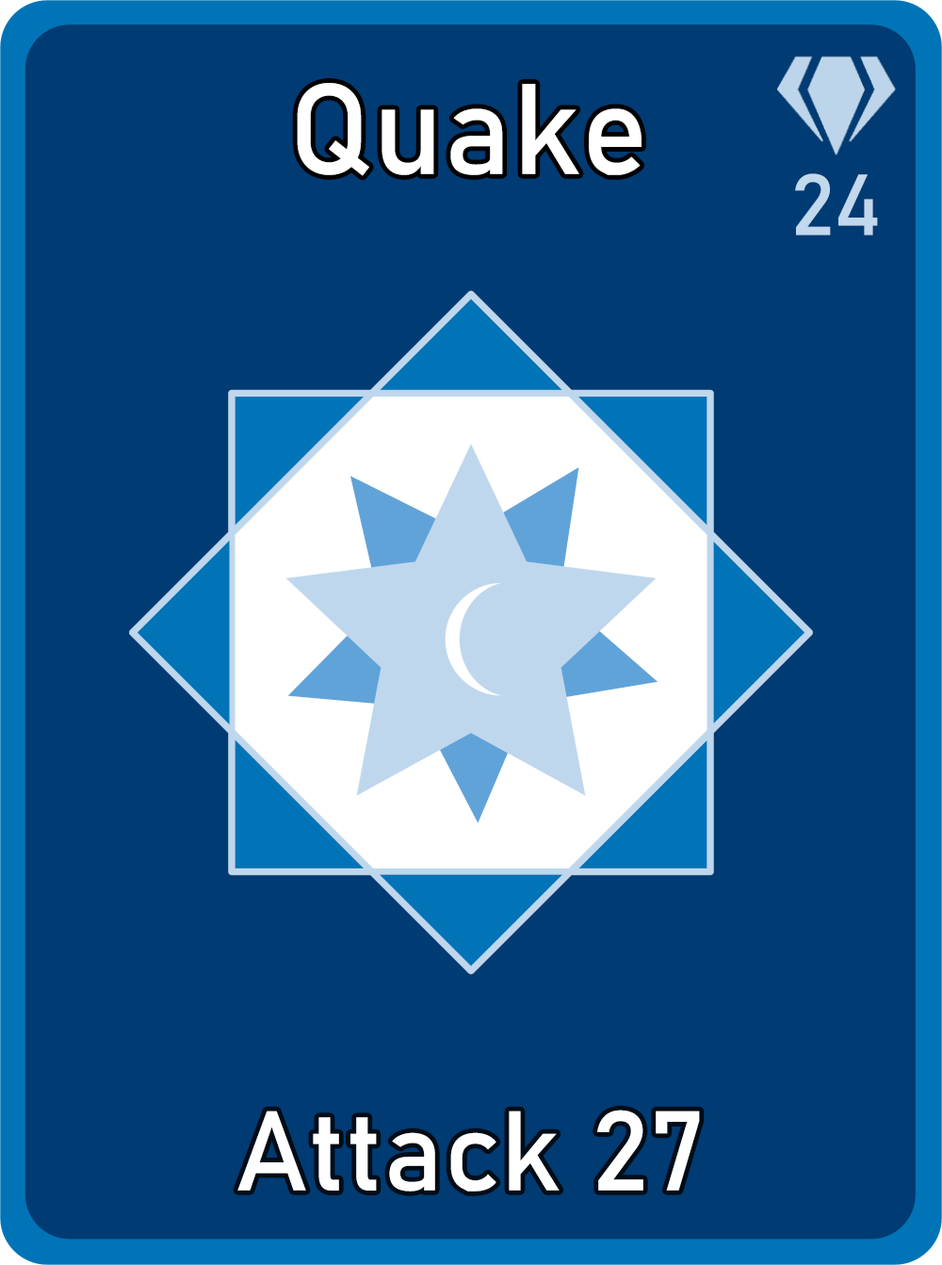
<style>
.page{position:relative;width:942px;height:1265px;background:#003b73}
.page>*{position:absolute;margin:0}
.t1{font:126.7px "Bahnschrift";letter-spacing:0.01em;color:#ffffff}
.t2{font:85px "Bahnschrift";letter-spacing:0.01em;color:#c1d8ed}
.t3{font:111.3px "Bahnschrift";letter-spacing:0.01em;color:#ffffff}
</style>
<div class="page">
<p class="t1" style="left:297px;top:83px;width:345px;height:93px">Quake</p>
<p class="t2" style="left:795px;top:173px;width:83px;height:63px">24</p>
<p class="t3" style="left:237px;top:1110px;width:463px;height:82px">Attack 27</p>
</div>
